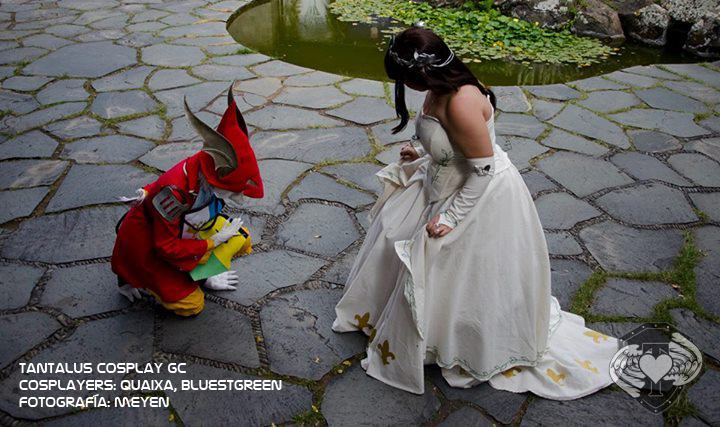
<style>
.page{position:relative;width:720px;height:427px}
.page>*{position:absolute;margin:0}
.t1{font:14px "NasalizationRg-Regular";color:#ffffff}
</style>
<div class="page">
<p class="t1" style="left:19px;top:363px;width:263px;height:44px">tantalus cosplay gc<br>cosplayers: quaixa, bluestgreen<br>fotografía: meyen</p>
</div>
